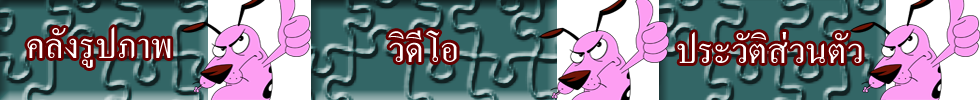
<style>
.page{position:relative;width:980px;height:100px}
.page>*{position:absolute;margin:0}
.t1{font:48px "AngsanaNew";color:#ffffff}
</style>
<div class="page">
<p class="t1" style="left:27px;top:27px;width:144px;height:41px">คลังรูปภาพ</p>
<p class="t1" style="left:388px;top:30px;width:69px;height:32px">วิดีโอ</p>
<p class="t1" style="left:677px;top:32px;width:185px;height:31px">ประวัติส่วนตัว</p>
</div>
